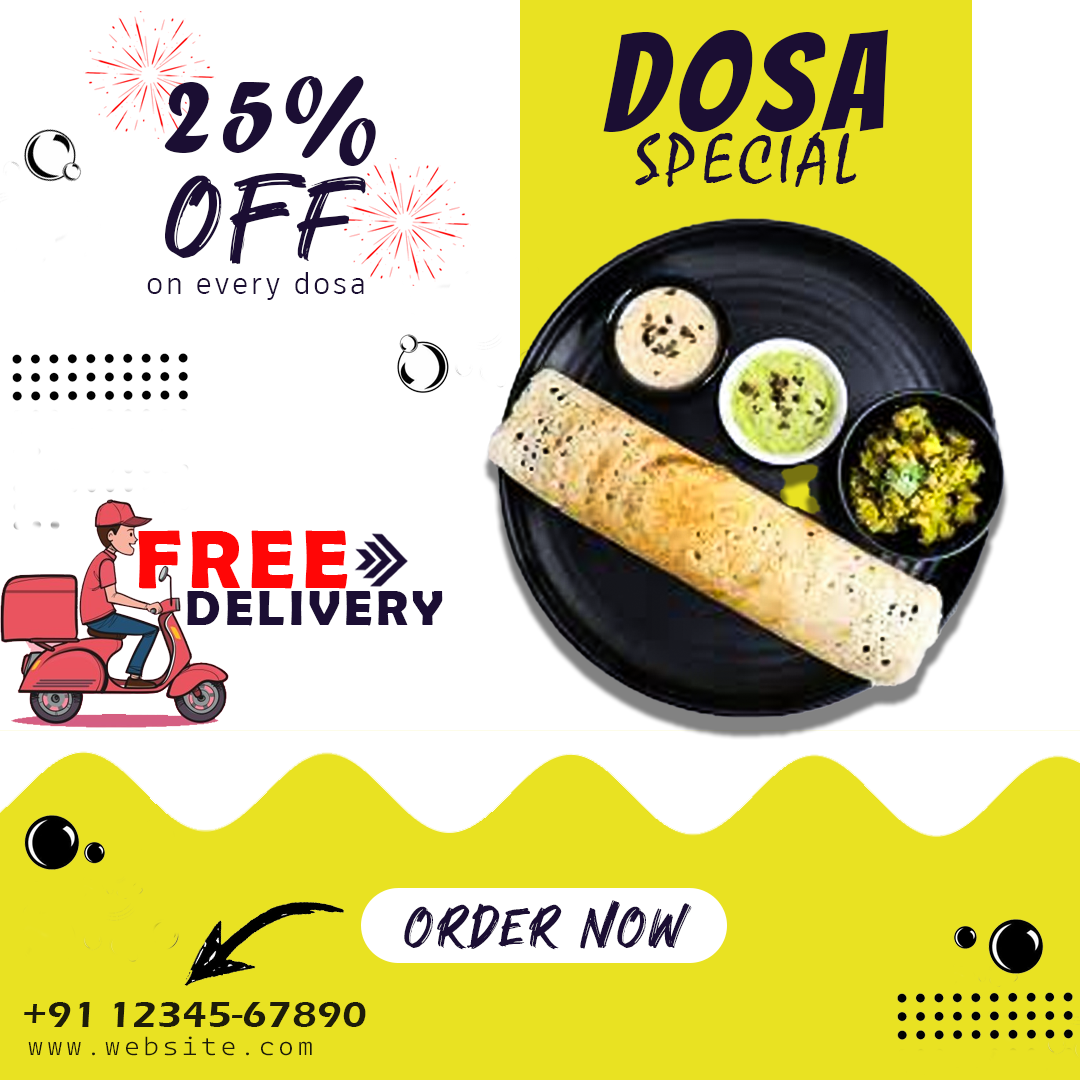
<style>
.page{position:relative;width:1080px;height:1080px;background:#ffffff}
.page>*{position:absolute;margin:0}
.t1{font:137.5px "Bangers-Regular";letter-spacing:0.08em;color:#1b0e33}
.t2{font:110.4px "ForteMT";letter-spacing:0.08em;color:#1b0e33}
.t3{font:70.8px "Mistral";letter-spacing:0.08em;color:#1b0e33}
.t4{font:110.4px "Cooldex";letter-spacing:0.08em;color:#1b0e33}
.t5{font:29.2px "ArtifaktElement-Regular";letter-spacing:0.08em;color:#1b0e33}
.t6{font:83.5px "BerlinSansFBDemi-Bold";letter-spacing:0.08em;color:#ff0606}
.t7{font:50px "BerlinSansFBDemi-Bold";letter-spacing:0.08em;color:#1b0e33}
.t8{font:55.2px "Cooldex";letter-spacing:0.08em;color:#1b0e33}
.t9{font:37.5px "ErasITC-Demi";color:#1d1c0a;scale:1.09 1}
.t10{font:25px "CascadiaMonoRoman-Light";letter-spacing:0.12em;color:#1d1c0a;scale:1.09 1}
</style>
<div class="page">
<p class="t1" style="left:603px;top:29px;width:286px;height:103px">DOSA</p>
<p class="t2" style="left:164px;top:76px;width:212px;height:90px">25%</p>
<p class="t3" style="left:635px;top:132px;width:222px;height:55px">SPECIAL</p>
<p class="t4" style="left:165px;top:173px;width:201px;height:91px">OFF</p>
<p class="t5" style="left:147px;top:272px;width:217px;height:28px">on every dosa</p>
<p class="t6" style="left:138px;top:530px;width:210px;height:59px">FREE</p>
<p class="t7" style="left:187px;top:591px;width:256px;height:35px">DELIVERY</p>
<p class="t8" style="left:404px;top:900px;width:288px;height:50px">ORDER NOW</p>
<p class="t9" style="left:24px;top:1002px;width:342px;height:25px">+91 12345-67890</p>
<p class="t10" style="left:28px;top:1036px;width:284px;height:20px">www.website.com</p>
</div>
